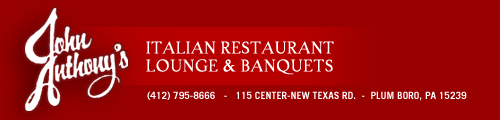
<style>
.page{position:relative;width:500px;height:120px;background:#990000}
.page>*{position:absolute;margin:0}
.t1{font:18px/18px "TaskSmallCaps";letter-spacing:0.05em;color:#ffffff;text-transform:uppercase}
.t2{font:18px/18px "TaskSmallCaps";letter-spacing:0.06em;color:#ffffff;text-transform:uppercase}
.t3{font:10px "TradeGothicLT-Bold";color:#ffffff;text-transform:uppercase}
</style>
<div class="page">
<p class="t1" style="left:146px;top:41px;width:188px;height:34px">Italian Restaurant<br><span class="t2">Lounge &amp; Banquets</span></p>
<p class="t3" style="left:147px;top:91px;width:320px;height:10px">(412) 795-8666   -   115 center-New Texas Rd.  -  Plum Boro, PA 15239</p>
</div>
